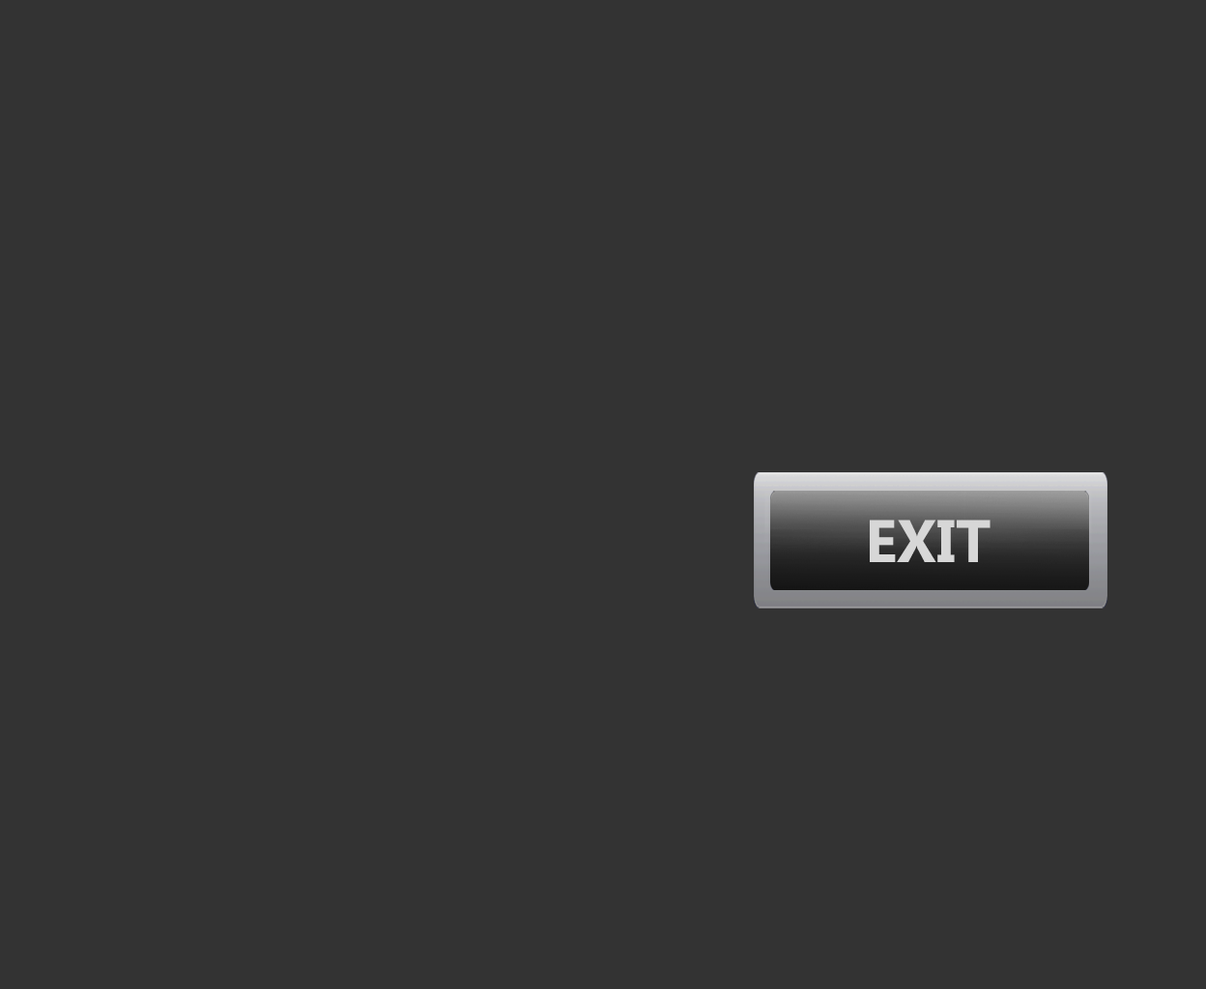
<style>
.page{position:relative;width:1206px;height:989px;background:#333333}
.page>*{position:absolute;margin:0}
.t1{font:59.9px "MicrosoftTaiLe-Bold";color:#d7d7d7}
</style>
<div class="page">
<p class="t1" style="left:869px;top:520px;width:121px;height:42px">EXIT</p>
</div>
